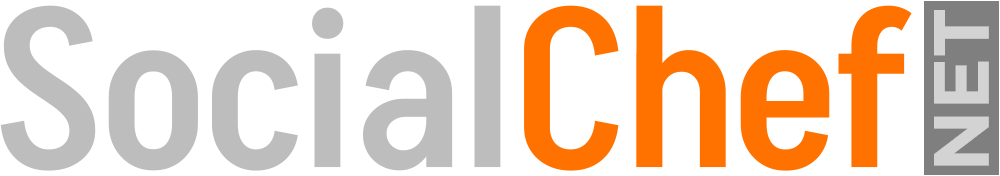
<style>
.page{position:relative;width:1000px;height:176px;background:#ffffff}
.page>*{position:absolute;margin:0}
.t1{font:222.2px "Akshar-Medium";letter-spacing:-0.01em;color:#bdbdbd}
.t2{font:222.2px "Akshar-Medium";letter-spacing:-0.01em;color:#ff7200}
.t3{font:78.3px "GothamPro-Bold";color:#d3d3d3}
</style>
<div class="page">
<p class="t1" style="left:0px;top:5px;width:912px;height:166px">Social<span class="t2">Chef</span></p>
<p class="t3" style="left:934px;top:10px;width:55px;height:156px;rotate:-90deg">NET</p>
</div>
